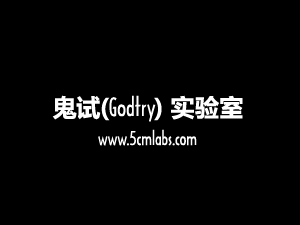
<style>
.page{position:relative;width:300px;height:225px;background:#000000}
.page>*{position:absolute;margin:0}
.t1{font:24px "ArchitecturePlain";color:#ffffff}
.t2{font:24px "MicrosoftYaHei";color:#ffffff}
.t3{font:18px "ArchitecturePlain";color:#ffffff}
</style>
<div class="page">
<p class="t1" style="left:52px;top:95px;width:191px;height:27px"><span class="t2">鬼试(</span>Godtry<span class="t2">) 实验室</span></p>
<p class="t3" style="left:98px;top:129px;width:99px;height:17px">www.5cmlabs.com</p>
</div>
